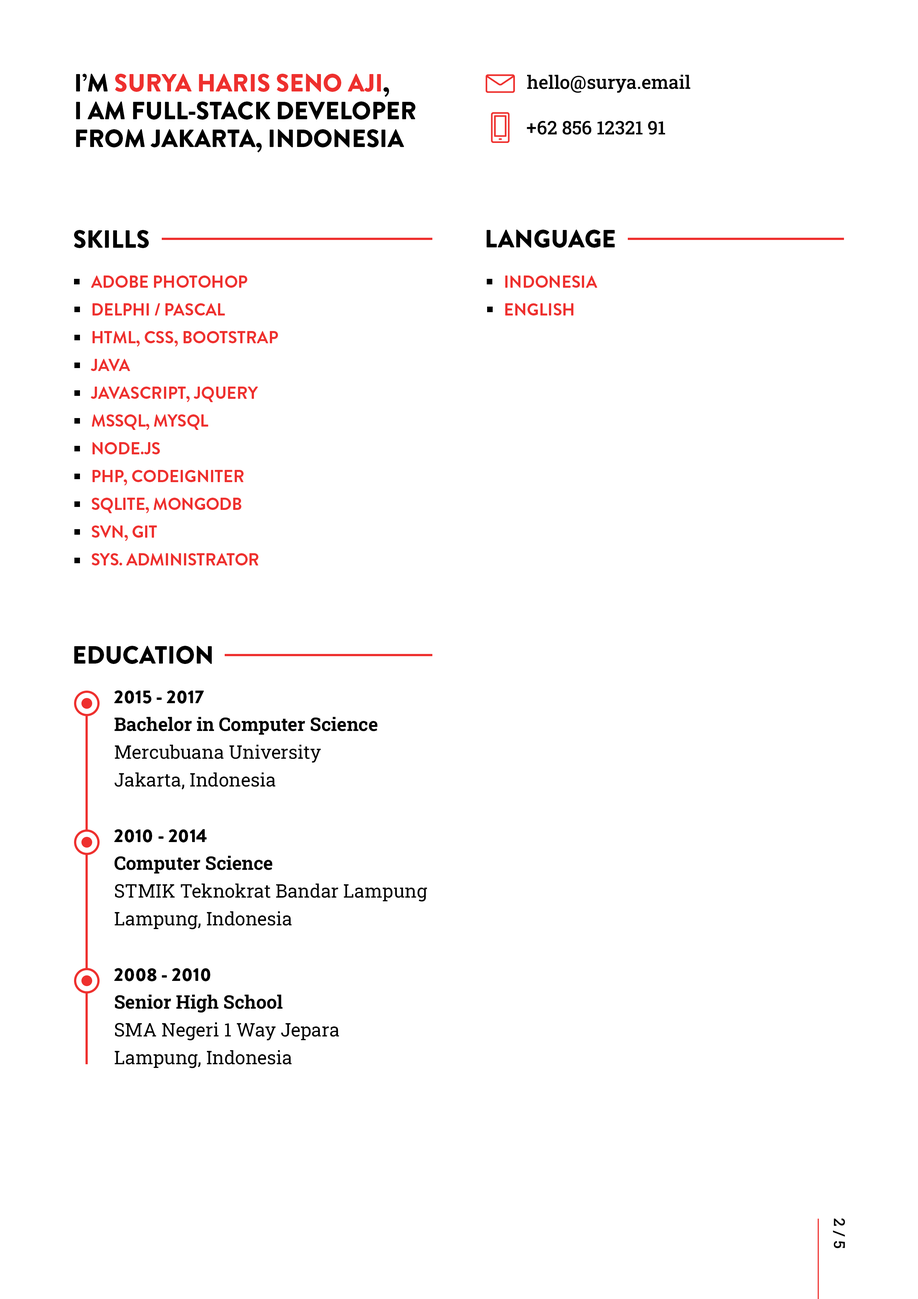
<style>
.page{position:relative;width:918px;height:1299px;background:#ffffff}
.page>*{position:absolute;margin:0}
.t1{font:24.7px/27.8px "BrandonGrotesque-Black";color:#000000}
.t2{font:24.7px/27.8px "BrandonGrotesque-Black";color:#ee302e}
.t3{font:18.5px "RobotoSlab-Medium";color:#000000}
.t4{font:24.7px "BrandonGrotesque-Black";color:#000000}
.t5{font:17px/27.8px "BrandonGrotesque-Bold";color:#ee302e}
.t6{font:17px/27.8px "BrandonGrotesque-Bold";letter-spacing:-0.01em;color:#ee302e}
.t7{font:18.5px/27.8px "RobotoSlab-Regular";color:#000000}
.t8{font:18.5px/27.8px "BrandonGrotesque-Black";color:#000000}
.t9{font:18.5px/27.8px "RobotoSlab-Bold";color:#000000}
.t10{font:15.4px "RobotoSlab-Medium";color:#000000}
</style>
<div class="page">
<p class="t1" style="left:76px;top:74px;width:340px;height:79px">I’M <span class="t2">SURYA HARIS SENO AJI</span>,<br>I AM FULL-STACK DEVELOPER FROM JAKARTA, INDONESIA</p>
<p class="t3" style="left:527px;top:74px;width:163px;height:19px">hello@surya.email</p>
<p class="t3" style="left:527px;top:121px;width:138px;height:14px">+62 856 12321 91</p>
<p class="t4" style="left:74px;top:230px;width:75px;height:18px">SKILLS</p>
<p class="t4" style="left:486px;top:230px;width:129px;height:18px">LANGUAGE</p>
<p class="t5" style="left:91px;top:275px;width:187px;height:290px">ADOBE PHOTOHOP<br>DELPHI / PASCAL<br>HTML, CSS, BOOTSTRAP<br>JAVA<br>JAVASCRIPT, JQUERY<br><span class="t6">MSSQL, MYSQL<br></span>NODE.JS<br>PHP, CODEIGNITER<span class="t6"><br>SQLITE, MONGODB<br>SVN, GIT<br>SYS. ADMINISTRATOR</span></p>
<p class="t5" style="left:505px;top:275px;width:93px;height:40px">INDONESIA<br>ENGLISH</p>
<p class="t4" style="left:74px;top:646px;width:138px;height:18px">EDUCATION</p>
<p class="t7" style="left:114px;top:690px;width:313px;height:378px"><span class="t8">2015 - 2017<br></span><span class="t9">Bachelor in Computer Science<br></span>Mercubuana University<br>Jakarta, Indonesia<br><br><span class="t8">2010 - 2014<br></span><span class="t9">Computer Science<br></span>STMIK Teknokrat Bandar Lampung<br>Lampung, Indonesia<br><br><span class="t8">2008 - 2010<br></span><span class="t9">Senior High School<br></span>SMA Negeri 1 Way Jepara<br>Lampung, Indonesia</p>
<p class="t10" style="left:833px;top:1218px;width:12px;height:30px;rotate:90deg">2 / 5</p>
</div>
